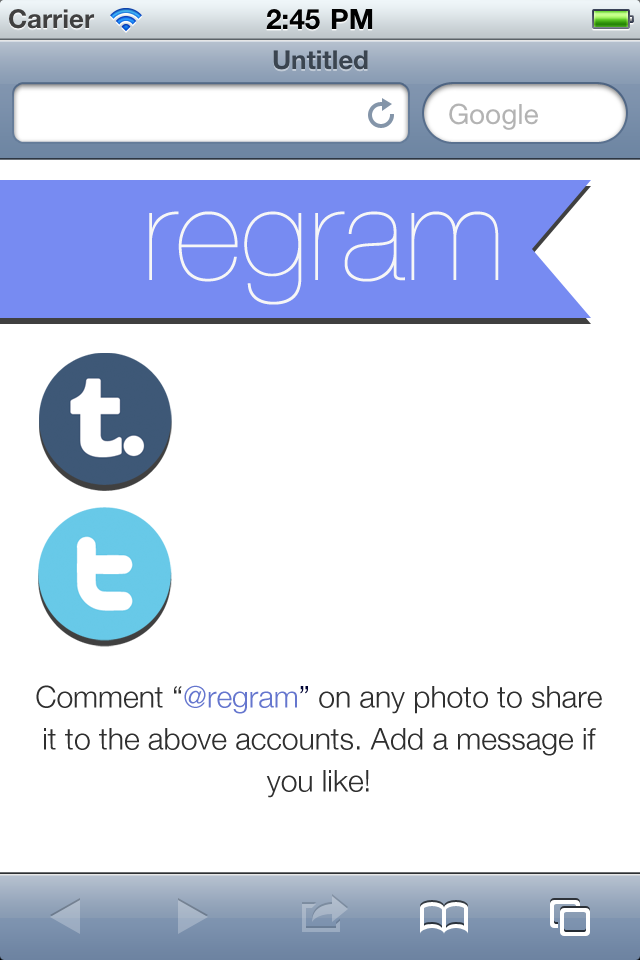
<style>
.page{position:relative;width:640px;height:960px;background:#ffffff}
.page>*{position:absolute;margin:0}
.t1{font:130px "HelveticaNeue-UltraLight";color:#f6f6f6}
.t2{font:30px/42px "HelveticaNeue-Light";color:#2f2f2f}
.t3{font:30px/42px "HelveticaNeue-Light";color:#6576ce}
.t4{font:30px/42px "HelveticaNeue-Light";color:#000333}
</style>
<div class="page">
<p class="t1" style="left:149px;top:211px;width:350px;height:94px">regram</p>
<p class="t2" style="left:36px;top:685px;width:566px;height:113px;text-align:center">Comment “<span class="t3">@regram</span><span class="t4">”</span> on any photo to share it to the above accounts. Add a message if you like!</p>
</div>
